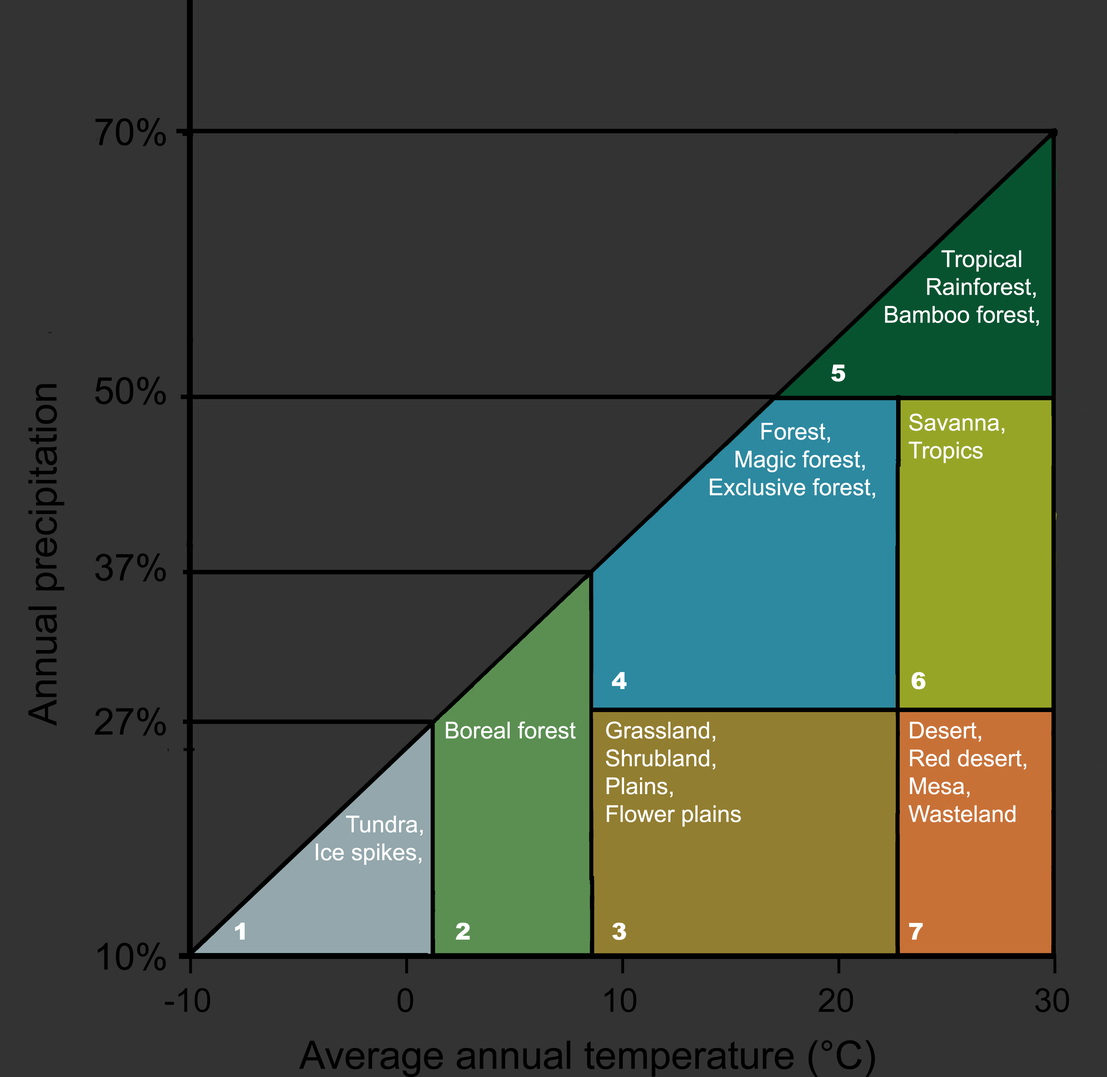
<style>
.page{position:relative;width:1107px;height:1077px;background:#333333}
.page>*{position:absolute;margin:0}
.t1{font:23.2px "ArialMT";color:#ffffff}
</style>
<div class="page">
<p class="t1" style="left:885px;top:250px;width:154px;height:76px">Tropical<br>       Rainforest,<br>        Bamboo forest,</p>
<p class="t1" style="left:909px;top:414px;width:96px;height:49px">Savanna,<br>Tropics</p>
<p class="t1" style="left:710px;top:423px;width:165px;height:76px">Forest,<br>                    Magic forest,<br>                Exclusive forest,</p>
<p class="t1" style="left:446px;top:721px;width:130px;height:18px">Boreal forest</p>
<p class="t1" style="left:606px;top:721px;width:135px;height:106px">Grassland,<br>Shrubland,<br>Plains,<br>Flower plains</p>
<p class="t1" style="left:908px;top:722px;width:119px;height:100px">Desert,<br>Red desert,<br>Mesa,<br>Wasteland</p>
<p class="t1" style="left:316px;top:816px;width:107px;height:49px">Tundra,<br>    Ice spikes,</p>
</div>
